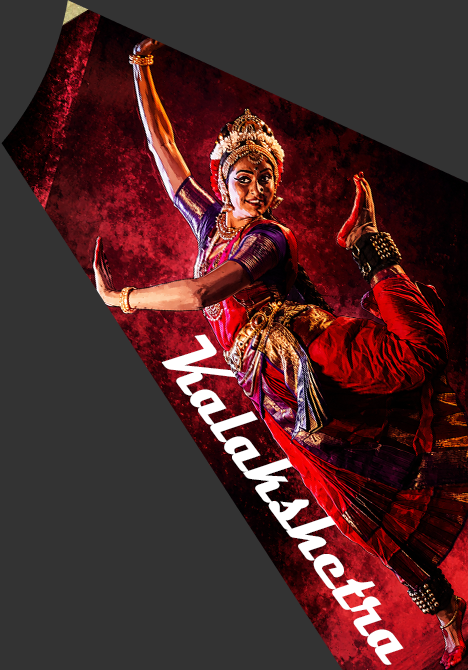
<style>
.page{position:relative;width:468px;height:670px;background:#333333}
.page>*{position:absolute;margin:0}
.t1{font:74.7px "Magneto-Bold";color:#ffffff;scale:0.77 1}
</style>
<div class="page">
<p class="t1" style="left:161px;top:334px;width:243px;height:331px;rotate:54deg">Kalakshetra</p>
</div>
